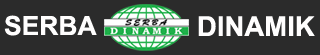
<style>
.page{position:relative;width:320px;height:55px;background:#2b2b2b}
.page>*{position:absolute;margin:0}
.t1{font:26.5px "Arial-BoldMT";color:#fffefe}
.t2{font:27.5px "Arial-BoldMT";color:#fffefe}
</style>
<div class="page">
<p class="t1" style="left:4px;top:15px;width:93px;height:21px">SERBA</p>
<p class="t2" style="left:198px;top:16px;width:117px;height:20px">DINAMIK</p>
</div>
